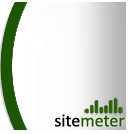
<style>
.page{position:relative;width:130px;height:134px;background:#ffffff}
.page>*{position:absolute;margin:0}
.t1{font:18px "Calibri";color:#225700}
.t2{font:18px "Calibri";color:#000000}
</style>
<div class="page">
<p class="t1" style="left:55px;top:114px;width:70px;height:13px"><span class="t2">site</span>meter</p>
</div>
